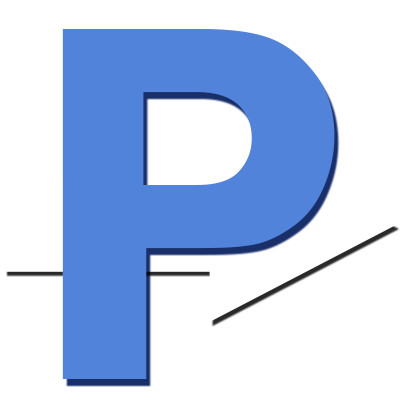
<style>
.page{position:relative;width:400px;height:400px;background:#ffffff}
.page>*{position:absolute;margin:0}
.t1{font:525.1px "FranklinGothic-Demi";color:#5183da}
</style>
<div class="page">
<p class="t1" style="left:62px;top:29px;width:273px;height:350px">P</p>
</div>
